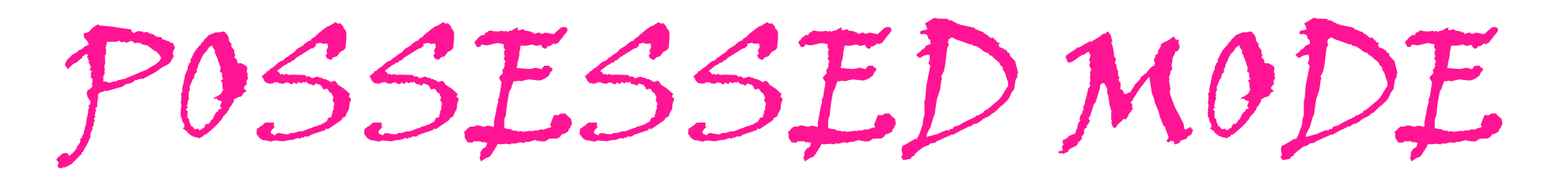
<style>
.page{position:relative;width:1568px;height:190px;background:#ffffff}
.page>*{position:absolute;margin:0}
.t1{font:158.4px "VinerHandITC";color:#ff1493}
</style>
<div class="page">
<p class="t1" style="left:56px;top:17px;width:1446px;height:152px">POSSESSED MODE</p>
</div>
